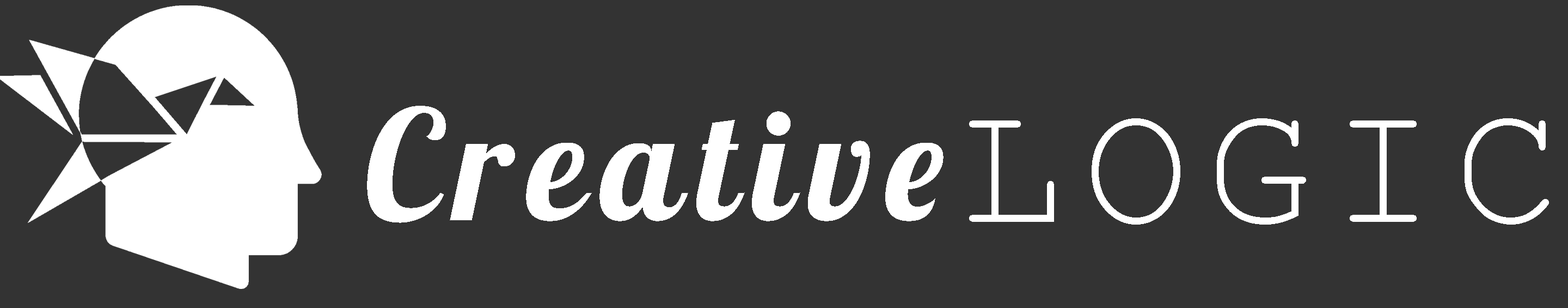
<style>
.page{position:relative;width:1568px;height:308px;background:#333333}
.page>*{position:absolute;margin:0}
.t1{font:152.4px "Lobster-Regular";letter-spacing:0.1em;color:#ffffff}
.t2{font:176.9px "CourierNewPSMT";letter-spacing:0.1em;color:#ffffff}
</style>
<div class="page">
<p class="t1" style="left:367px;top:106px;width:577px;height:117px">Creative</p>
<p class="t2" style="left:969px;top:118px;width:580px;height:106px">LOGIC</p>
</div>
